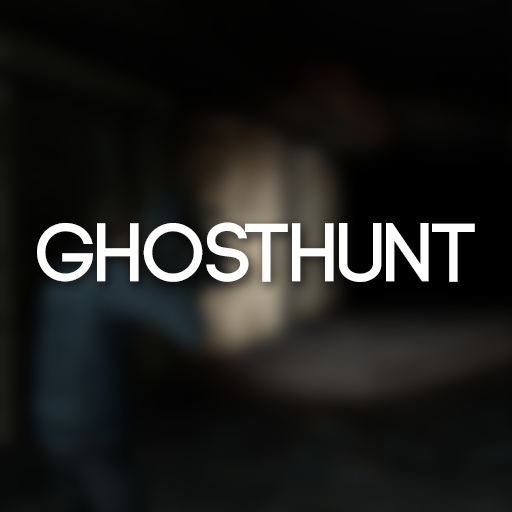
<style>
.page{position:relative;width:512px;height:512px}
.page>*{position:absolute;margin:0}
.t1{font:82px "Code-Bold";color:#ffffff}
</style>
<div class="page">
<p class="t1" style="left:37px;top:222px;width:438px;height:60px">GHOSTHUNT</p>
</div>
